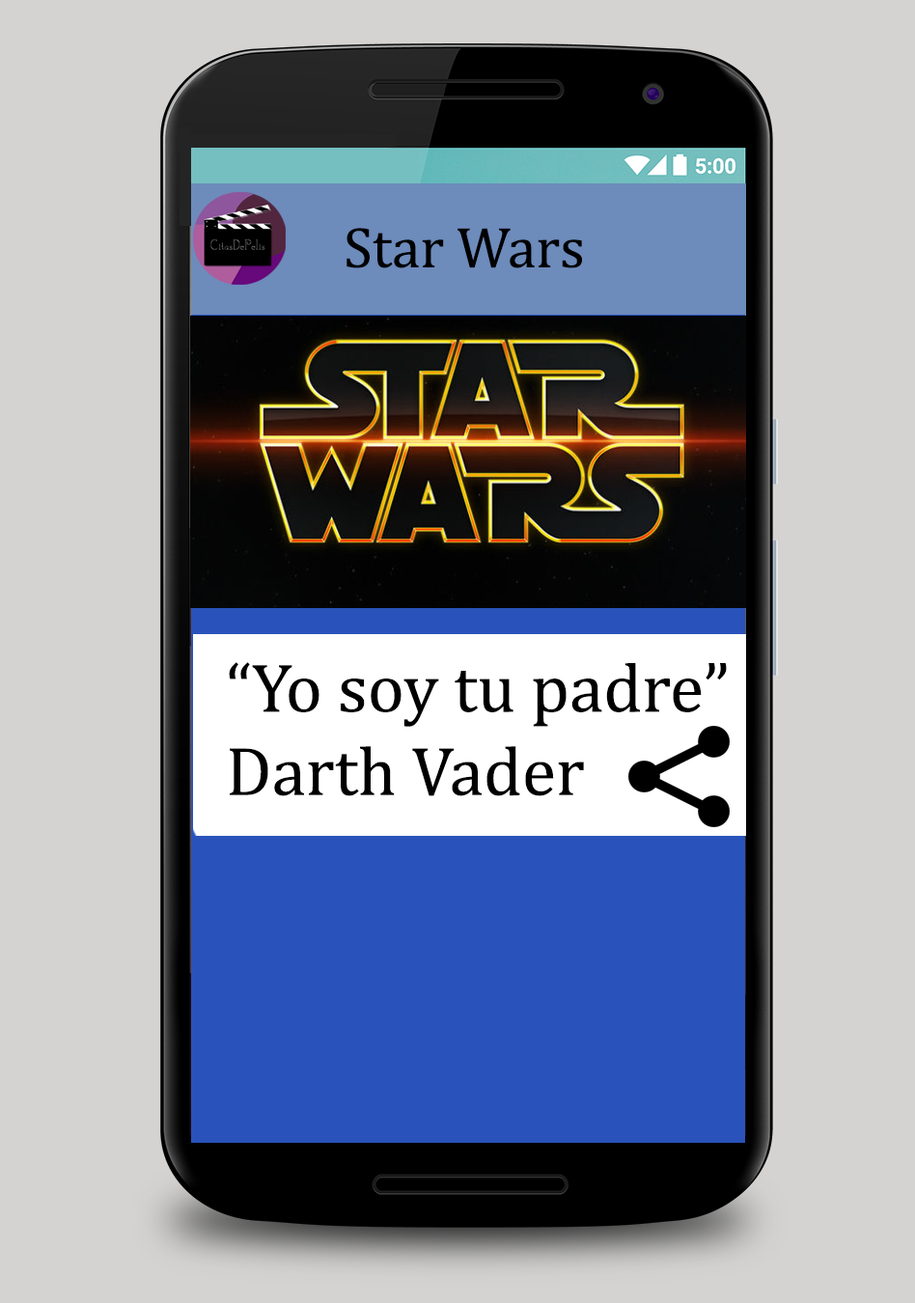
<style>
.page{position:relative;width:915px;height:1303px;background:#d4d3d2}
.page>*{position:absolute;margin:0}
.t1{font:57.9px "CambriaMath";color:#000000}
.t2{font:69.5px "CambriaMath";color:#000000}
</style>
<div class="page">
<p class="t1" style="left:347px;top:228px;width:235px;height:40px">Star Wars</p>
<p class="t2" style="left:229px;top:662px;width:498px;height:134px">“Yo soy tu padre” Darth Vader</p>
</div>
